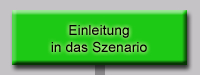
<style>
.page{position:relative;width:200px;height:75px;background:#1ec915}
.page>*{position:absolute;margin:0}
.t1{font:14px "ArialMT";color:#000000}
</style>
<div class="page">
<p class="t1" style="left:51px;top:25px;width:96px;height:28px;text-align:center">Einleitung<br>in das Szenario</p>
</div>
